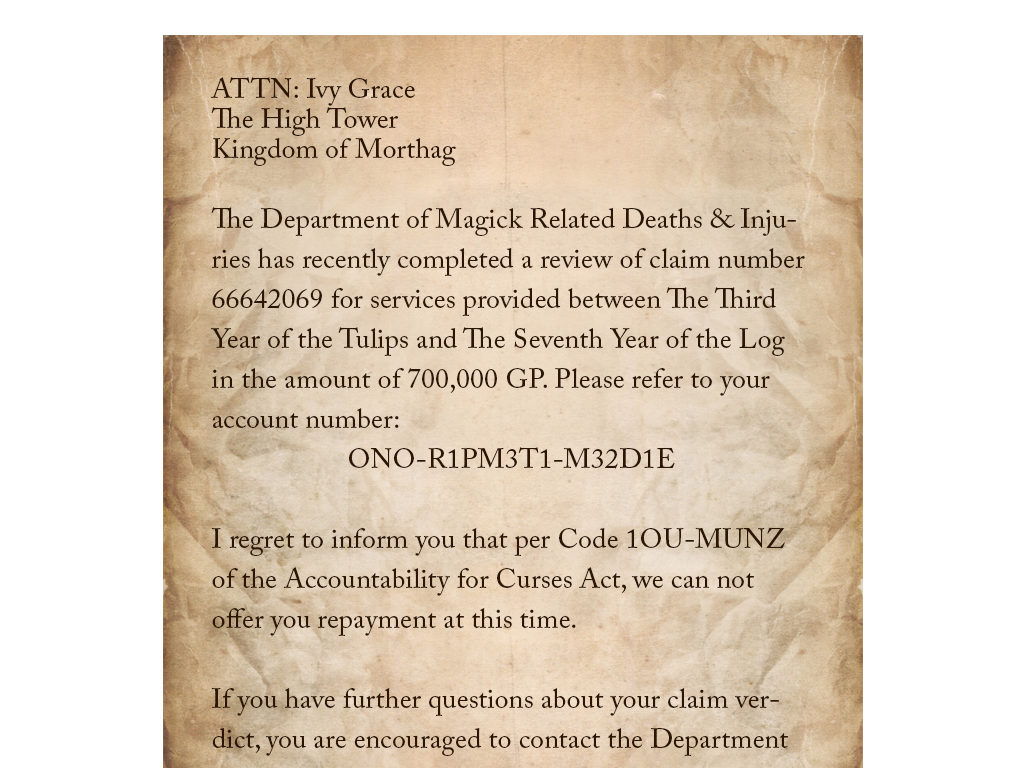
<style>
.page{position:relative;width:1024px;height:768px;background:#ffffff}
.page>*{position:absolute;margin:0}
.t1{font:48px/40px "ACaslonPro-Regular";color:#2c1503}
.t2{font:48px/30px "ACaslonPro-Regular";color:#2c1503}
</style>
<div class="page">
<p class="t1" style="left:211px;top:77px;width:594px;height:679px"><span class="t2">ATTN: Ivy Grace<br>The High Tower<br>Kingdom of Morthag<br><br></span>The Department of Magick Related Deaths &amp; Injuries has recently completed a review of claim number 66642069 for services provided between The Third Year of the Tulips and The Seventh Year of the Log in the amount of 700,000 GP. Please refer to your account number: <br>ONO-R1PM3T1-M32D1E<br><br>I regret to inform you that per Code 1OU-MUNZ of the Accountability for Curses Act, we can not offer you repayment at this time.<br><br>If you have further questions about your claim verdict, you are encouraged to contact the Department</p>
</div>
